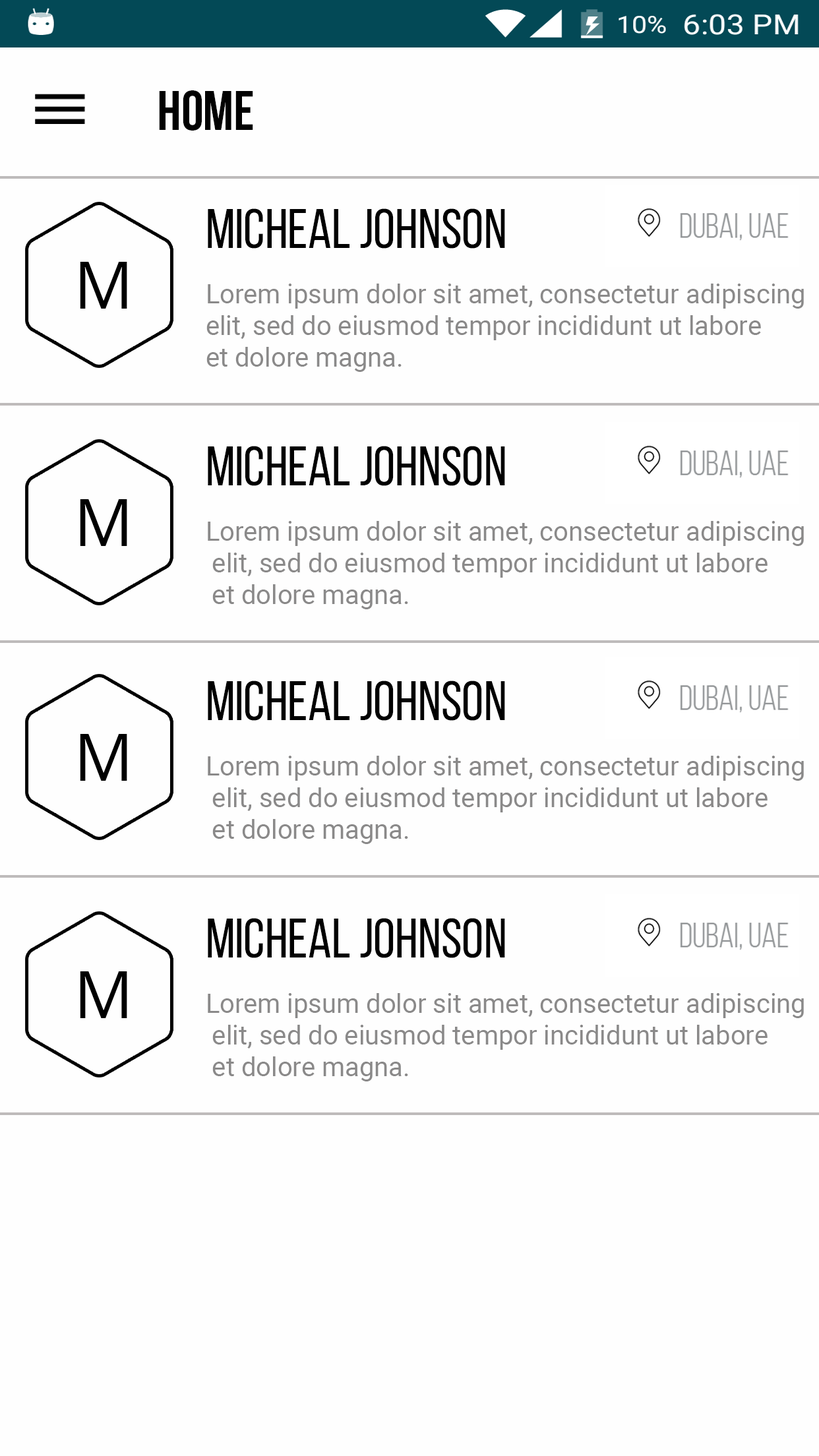
<style>
.page{position:relative;width:819px;height:1456px;background:#fefefe}
.page>*{position:absolute;margin:0}
.t1{font:56px "BebasNeueBold";color:#010101}
.t2{font:56px "BebasNeueRegular";color:#000000}
.t3{font:65.9px "OpenSans";color:#000000}
.t4{font:26.4px "Roboto-Regular";color:#8a8989}
</style>
<div class="page">
<p class="t1" style="left:159px;top:90px;width:94px;height:41px">HOME</p>
<p class="t2" style="left:208px;top:208px;width:297px;height:41px">MICHEAL JOHNSON</p>
<p class="t3" style="left:80px;top:262px;width:47px;height:47px">M</p>
<p class="t4" style="left:206px;top:284px;width:598px;height:88px">Lorem ipsum dolor sit amet, consectetur adipiscing<br>elit, sed do eiusmod tempor incididunt ut labore<br>et dolore magna.</p>
<p class="t2" style="left:208px;top:446px;width:297px;height:40px">MICHEAL JOHNSON</p>
<p class="t3" style="left:80px;top:499px;width:47px;height:47px">M</p>
<p class="t4" style="left:208px;top:521px;width:596px;height:88px">Lorem ipsum dolor sit amet, consectetur adipiscing<br> elit, sed do eiusmod tempor incididunt ut labore<br> et dolore magna.</p>
<p class="t2" style="left:208px;top:681px;width:297px;height:40px">MICHEAL JOHNSON</p>
<p class="t3" style="left:80px;top:734px;width:47px;height:47px">M</p>
<p class="t4" style="left:208px;top:756px;width:596px;height:88px">Lorem ipsum dolor sit amet, consectetur adipiscing<br> elit, sed do eiusmod tempor incididunt ut labore<br> et dolore magna.</p>
<p class="t2" style="left:208px;top:918px;width:297px;height:40px">MICHEAL JOHNSON</p>
<p class="t3" style="left:80px;top:971px;width:47px;height:47px">M</p>
<p class="t4" style="left:208px;top:993px;width:596px;height:88px">Lorem ipsum dolor sit amet, consectetur adipiscing<br> elit, sed do eiusmod tempor incididunt ut labore<br> et dolore magna.</p>
</div>
